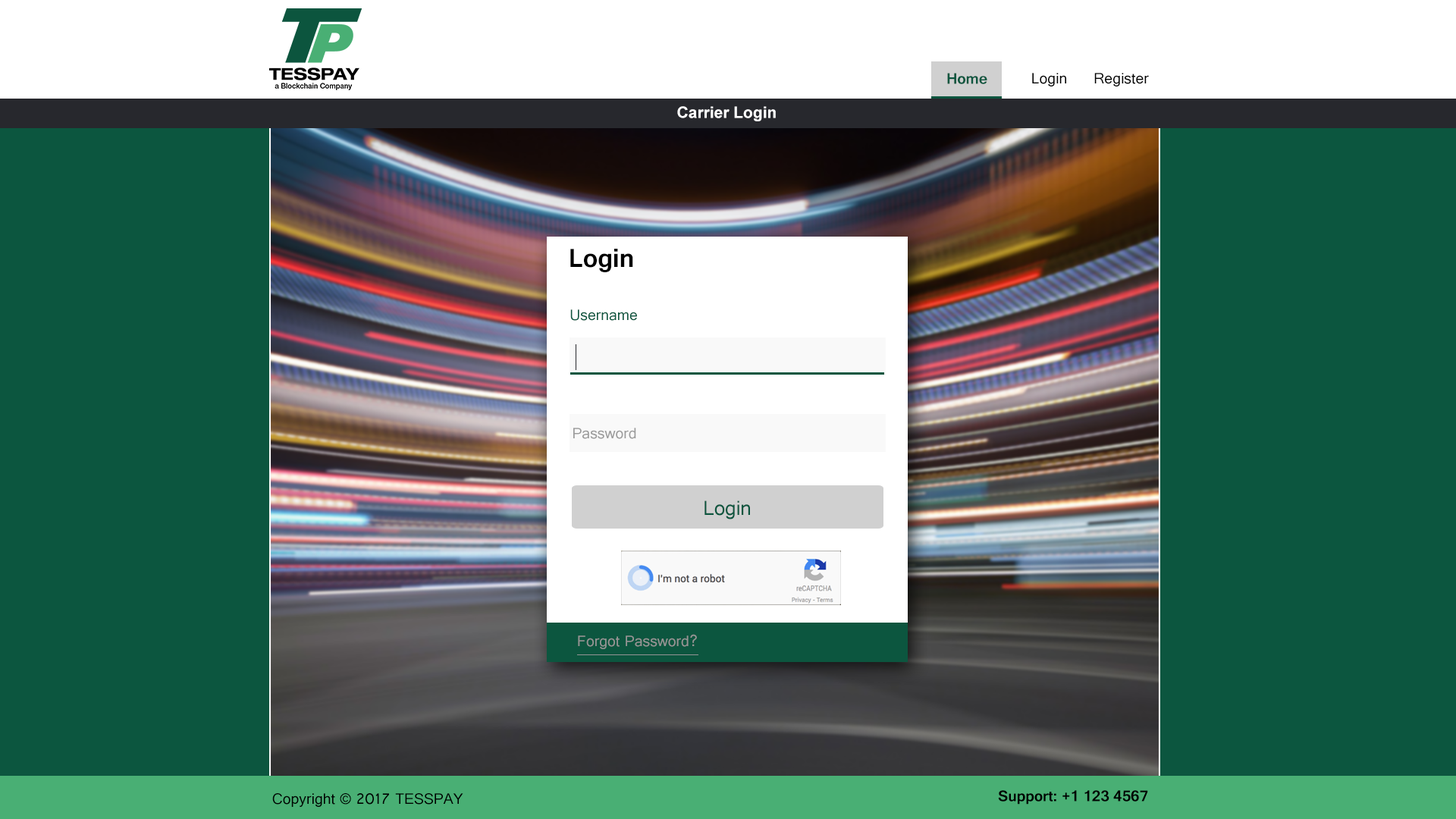
<style>
.page{position:relative;width:1456px;height:819px;background:#0c563f}
.page>*{position:absolute;margin:0}
.t1{font:15.9px "Gautami-Bold";color:#0c563f}
.t2{font:15.9px "Gautami";color:#010101}
.t3{font:15.9px "Arial-BoldMT";color:#ffffff}
.t4{font:27.3px "Gautami-Bold";color:#000000}
.t5{font:15.9px "Gautami";color:#0c563f}
.t6{font:15.9px "Gautami";color:#9b9b9b}
.t7{font:21.2px "Gautami";color:#0c563f}
.t8{font:15.9px "Gautami";color:#959595;text-decoration:underline}
.t9{font:15.9px "Gautami";color:#000000}
.t10{font:15.9px "Gautami-Bold";color:#000000}
</style>
<div class="page">
<p class="t1" style="left:947px;top:73px;width:40px;height:11px">Home</p>
<p class="t2" style="left:1032px;top:73px;width:34px;height:13px">Login</p>
<p class="t2" style="left:1094px;top:73px;width:55px;height:13px">Register</p>
<p class="t3" style="left:677px;top:106px;width:99px;height:15px">Carrier Login</p>
<p class="t4" style="left:570px;top:249px;width:63px;height:23px">Login</p>
<p class="t5" style="left:570px;top:309px;width:67px;height:12px">Username</p>
<p class="t6" style="left:573px;top:428px;width:63px;height:11px">Password</p>
<p class="t7" style="left:704px;top:500px;width:46px;height:19px">Login</p>
<p class="t8" style="left:577px;top:634px;width:121px;height:21px">Forgot Password?</p>
<p class="t9" style="left:272px;top:793px;width:191px;height:14px">Copyright © 2017 TESSPAY</p>
<p class="t10" style="left:998px;top:790px;width:150px;height:15px">Support: +1 123 4567</p>
</div>
